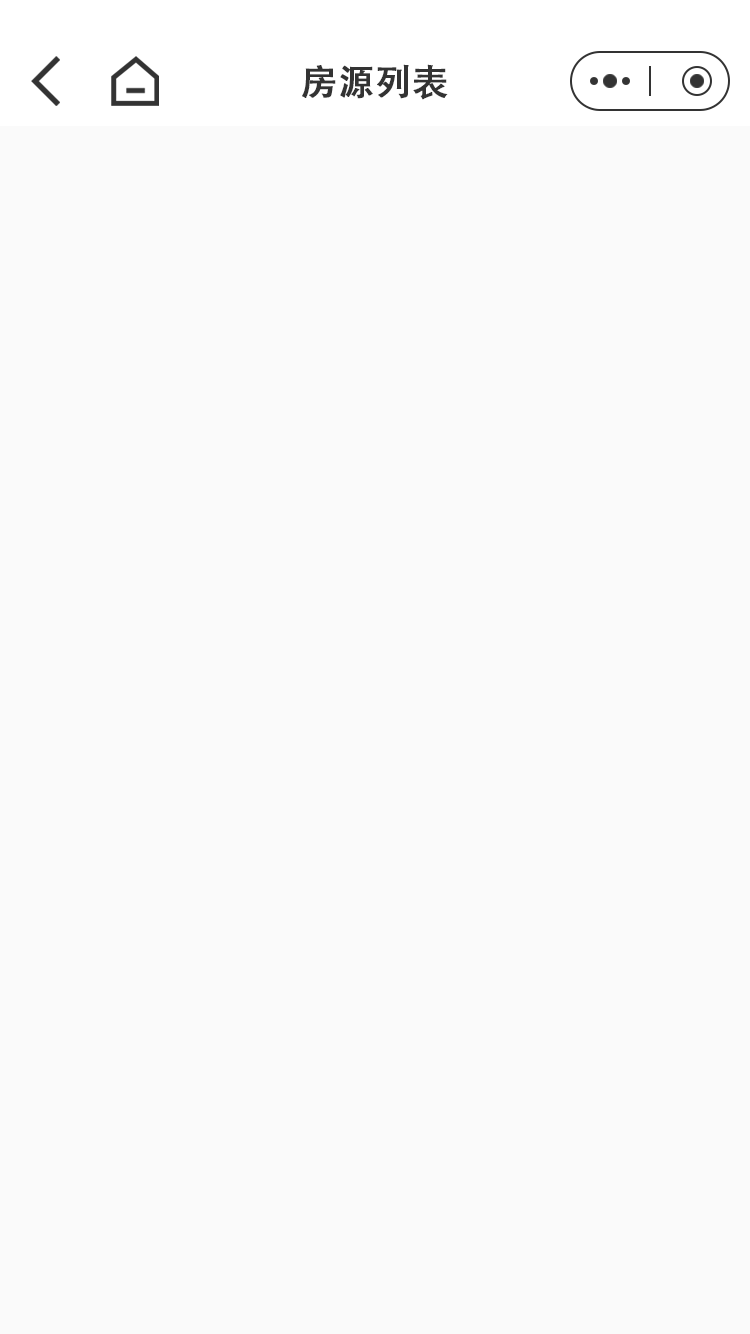
<style>
.page{position:relative;width:750px;height:1334px;background:#fafafa}
.page>*{position:absolute;margin:0}
.t1{font:36px "AdobeHeitiStd-Regular";color:#333333;font-weight:bold}
</style>
<div class="page">
<p class="t1" style="left:302px;top:64px;width:146px;height:36px">房源列表</p>
</div>
